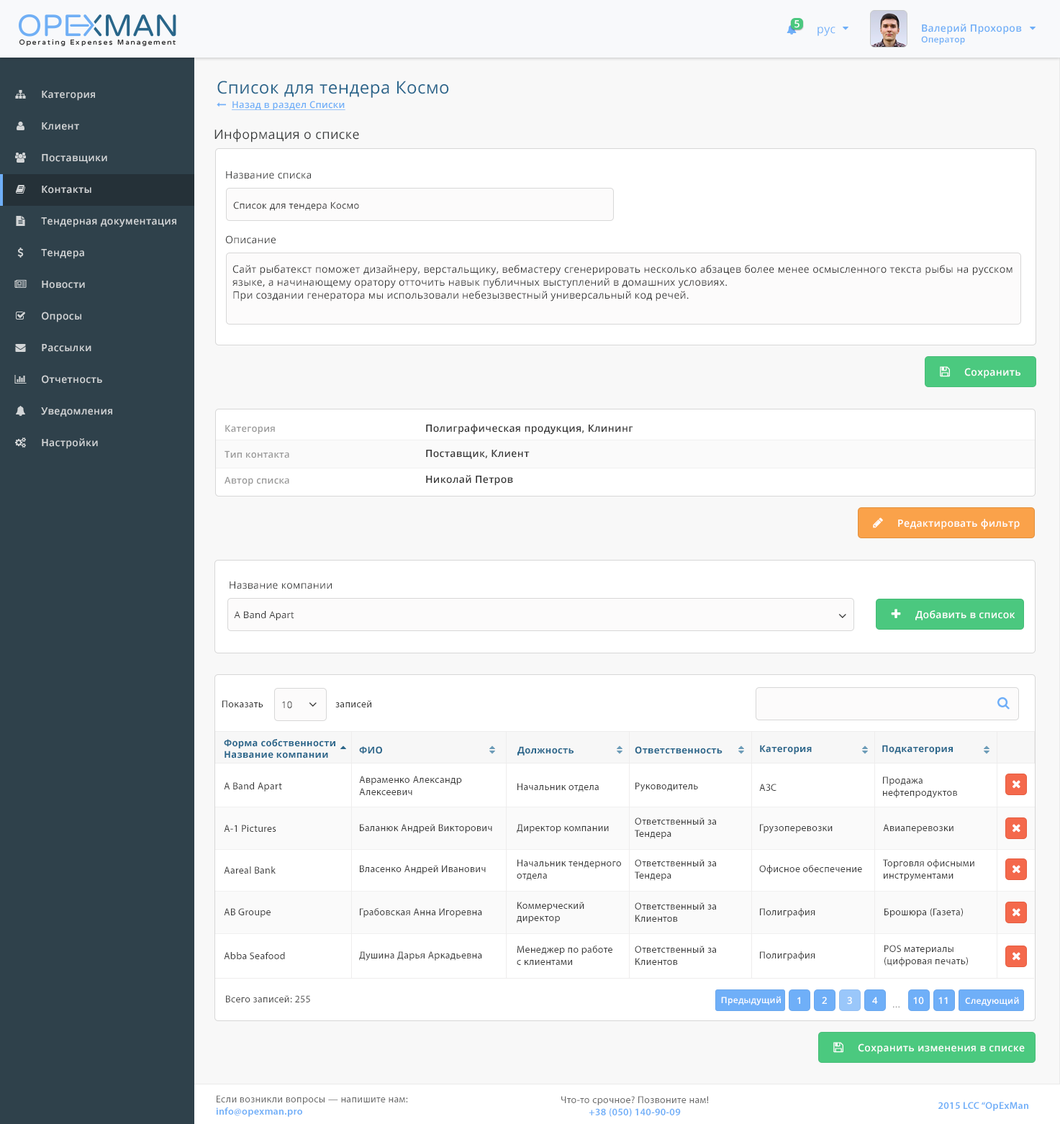
<style>
.page{position:relative;width:1060px;height:1124px;background:#ffffff}
.page>*{position:absolute;margin:0}
.t1{font:10px "OpenSans-Semibold";letter-spacing:0.025em;color:#ffffff}
.t2{font:11.5px "OpenSans";letter-spacing:0.025em;color:#6eaff8}
.t3{font:10px "OpenSans-Semibold";letter-spacing:0.025em;color:#6eaef7}
.t4{font:8.6px "OpenSans-Semibold";letter-spacing:0.025em;color:#6eaef7}
.t5{font:17.2px "OpenSans";letter-spacing:0.025em;color:#29658b}
.t6{font:10px "OpenSans-Semibold";letter-spacing:0.025em;color:#d2d5d7}
.t7{font:9.3px "OpenSans-Semibold";letter-spacing:0.025em;color:#6faff8;text-decoration:underline}
.t8{font:12.9px "OpenSans";letter-spacing:0.025em;color:#373838}
.t9{font:10px "OpenSans";letter-spacing:0.025em;color:#373838}
.t10{font:9.3px "OpenSans";letter-spacing:0.025em;color:#333333}
.t11{font:10px/12.9px "OpenSans";letter-spacing:0.025em;color:#333333}
.t12{font:9.4px "OpenSans-Semibold";letter-spacing:0.025em;color:#999999}
.t13{font:10.1px "OpenSans-Semibold";letter-spacing:0.025em;color:#333333}
.t14{font:9.3px "OpenSans-Semibold";letter-spacing:0.025em;color:#999999}
.t15{font:10px "MyriadPro-Regular";letter-spacing:0.025em;color:#333333}
.t16{font:9.3px "OpenSans-Bold";letter-spacing:0.025em;color:#29668b}
.t17{font:10px "MyriadPro-Regular";letter-spacing:0.025em;color:#3a3a3a}
.t18{font:10px "MyriadPro-Regular";letter-spacing:0.025em;color:#4c4c4c}
.t19{font:8.6px "OpenSans-Semibold";letter-spacing:0.025em;color:#ffffff}
.t20{font:9.3px "OpenSans-Semibold";letter-spacing:0.025em;color:#ffffff}
.t21{font:9.3px "OpenSans";letter-spacing:0.025em;color:#999999}
.t22{font:10px "MyriadPro-Regular";letter-spacing:0.025em;color:#696969}
.t23{font:10px "MyriadPro-Semibold";letter-spacing:0.025em;color:#6eaef8}
</style>
<div class="page">
<p class="t1" style="left:795px;top:20px;width:5px;height:8px">5</p>
<p class="t2" style="left:818px;top:27px;width:18px;height:9px">рус</p>
<p class="t3" style="left:921px;top:24px;width:101px;height:21px">Валерий Прохоров<br><span class="t4">Оператор</span></p>
<p class="t5" style="left:217px;top:81px;width:232px;height:17px">Список для тендера Космо</p>
<p class="t6" style="left:42px;top:91px;width:53px;height:10px">Категория</p>
<p class="t7" style="left:232px;top:101px;width:114px;height:9px">Назад в раздел Списки</p>
<p class="t6" style="left:42px;top:122px;width:37px;height:8px">Клиент</p>
<p class="t8" style="left:215px;top:129px;width:144px;height:14px">Информация о списке</p>
<p class="t6" style="left:42px;top:154px;width:65px;height:9px">Поставщики</p>
<p class="t9" style="left:226px;top:171px;width:85px;height:8px">Название списка</p>
<p class="t6" style="left:42px;top:186px;width:49px;height:8px">Контакты</p>
<p class="t10" style="left:233px;top:202px;width:126px;height:9px">Список для тендера Космо</p>
<p class="t6" style="left:41px;top:217px;width:135px;height:10px">Тендерная документация</p>
<p class="t9" style="left:225px;top:235px;width:51px;height:9px">Описание</p>
<p class="t6" style="left:41px;top:249px;width:43px;height:10px">Тендера</p>
<p class="t11" style="left:233px;top:265px;width:780px;height:37px;text-align:justify">Сайт рыбатекст поможет дизайнеру, верстальщику, вебмастеру сгенерировать несколько абзацев более менее осмысленного текста рыбы на русском языке, а начинающему оратору отточить навык публичных выступлений в домашних условиях.<br>При создании генератора мы использовали небезызвестный универсальный код речей.</p>
<p class="t6" style="left:42px;top:281px;width:43px;height:8px">Новости</p>
<p class="t6" style="left:42px;top:312px;width:39px;height:11px">Опросы</p>
<p class="t6" style="left:42px;top:344px;width:49px;height:8px">Рассылки</p>
<p class="t6" style="left:42px;top:375px;width:60px;height:9px">Отчетность</p>
<p class="t1" style="left:965px;top:368px;width:56px;height:11px">Сохранить</p>
<p class="t6" style="left:41px;top:407px;width:71px;height:10px">Уведомления</p>
<p class="t12" style="left:225px;top:425px;width:50px;height:9px">Категория</p>
<p class="t13" style="left:426px;top:424px;width:208px;height:11px">Полиграфическая продукция, Клининг</p>
<p class="t6" style="left:42px;top:438px;width:56px;height:11px">Настройки</p>
<p class="t13" style="left:426px;top:450px;width:104px;height:9px">Поставщик, Клиент</p>
<p class="t14" style="left:225px;top:451px;width:64px;height:8px">Тип контакта</p>
<p class="t14" style="left:225px;top:477px;width:64px;height:9px">Автор списка</p>
<p class="t13" style="left:426px;top:475px;width:87px;height:11px">Николай Петров</p>
<p class="t1" style="left:898px;top:519px;width:122px;height:11px">Редактировать фильтр</p>
<p class="t9" style="left:230px;top:582px;width:102px;height:8px">Название компании</p>
<p class="t10" style="left:234px;top:611px;width:60px;height:10px">A Band Apart</p>
<p class="t1" style="left:916px;top:610px;width:100px;height:11px">Добавить в список</p>
<p class="t15" style="left:222px;top:700px;width:41px;height:8px">Показать</p>
<p class="t10" style="left:282px;top:701px;width:10px;height:8px">10</p>
<p class="t15" style="left:335px;top:700px;width:36px;height:8px">записей</p>
<p class="t16" style="left:224px;top:739px;width:111px;height:20px">Форма собственности<br>Название компании</p>
<p class="t16" style="left:359px;top:747px;width:23px;height:7px">ФИО</p>
<p class="t16" style="left:518px;top:747px;width:56px;height:9px">Должность</p>
<p class="t16" style="left:635px;top:747px;width:88px;height:7px">Ответственность</p>
<p class="t16" style="left:760px;top:745px;width:52px;height:9px">Категория</p>
<p class="t16" style="left:883px;top:745px;width:70px;height:9px">Подкатегория</p>
<p class="t17" style="left:224px;top:783px;width:58px;height:9px">A Band Apart</p>
<p class="t17" style="left:359px;top:776px;width:103px;height:19px">Авраменко Александр <br>Алексеевич</p>
<p class="t17" style="left:518px;top:783px;width:81px;height:10px">Начальник отдела</p>
<p class="t17" style="left:636px;top:783px;width:62px;height:9px">Руководитель</p>
<p class="t17" style="left:759px;top:784px;width:18px;height:7px">АЗС</p>
<p class="t17" style="left:883px;top:777px;width:74px;height:21px">Продажа <br>нефтепродуктов</p>
<p class="t17" style="left:635px;top:818px;width:81px;height:21px">Ответственный за <br>Тендера</p>
<p class="t17" style="left:224px;top:825px;width:52px;height:7px">A-1 Pictures</p>
<p class="t17" style="left:360px;top:824px;width:132px;height:10px">Баланюк Андрей Викторович</p>
<p class="t17" style="left:517px;top:824px;width:92px;height:10px">Директор компании</p>
<p class="t17" style="left:760px;top:824px;width:73px;height:10px">Грузоперевозки</p>
<p class="t17" style="left:883px;top:824px;width:71px;height:10px">Авиаперевозки</p>
<p class="t17" style="left:224px;top:867px;width:52px;height:7px">Aareal Bank</p>
<p class="t17" style="left:360px;top:865px;width:126px;height:10px">Власенко Андрей Иванович</p>
<p class="t17" style="left:517px;top:860px;width:104px;height:21px">Начальник тендерного <br>отдела</p>
<p class="t17" style="left:635px;top:860px;width:81px;height:21px">Ответственный за <br>Тендера</p>
<p class="t17" style="left:759px;top:865px;width:103px;height:10px">Офисное обеспечение</p>
<p class="t17" style="left:883px;top:860px;width:92px;height:21px">Торговля офисными<br>инструментами</p>
<p class="t17" style="left:517px;top:902px;width:68px;height:22px">Коммерческий <br>директор</p>
<p class="t17" style="left:635px;top:903px;width:81px;height:19px">Ответственный за <br>Клиентов</p>
<p class="t17" style="left:224px;top:909px;width:47px;height:9px">AB Groupe</p>
<p class="t17" style="left:360px;top:909px;width:122px;height:9px">Грабовская Анна Игоревна</p>
<p class="t17" style="left:760px;top:909px;width:56px;height:9px">Полиграфия</p>
<p class="t17" style="left:885px;top:909px;width:78px;height:9px">Брошюра (Газета)</p>
<p class="t17" style="left:224px;top:952px;width:61px;height:8px">Abba Seafood</p>
<p class="t17" style="left:359px;top:952px;width:123px;height:9px">Душина Дарья Аркадьевна</p>
<p class="t17" style="left:517px;top:946px;width:96px;height:19px">Менеджер по работе <br>с клиентами</p>
<p class="t17" style="left:635px;top:946px;width:81px;height:19px">Ответственный за <br>Клиентов</p>
<p class="t17" style="left:760px;top:952px;width:56px;height:9px">Полиграфия</p>
<p class="t17" style="left:885px;top:945px;width:83px;height:22px">POS материалы<br>(цифровая печать)</p>
<p class="t18" style="left:226px;top:996px;width:84px;height:7px">Всего записей: 255</p>
<p class="t19" style="left:721px;top:996px;width:60px;height:10px">Предыдущий</p>
<p class="t20" style="left:798px;top:997px;width:3px;height:7px">1</p>
<p class="t20" style="left:822px;top:997px;width:5px;height:7px">2</p>
<p class="t20" style="left:847px;top:997px;width:5px;height:8px">3</p>
<p class="t20" style="left:873px;top:997px;width:5px;height:7px">4</p>
<p class="t20" style="left:914px;top:997px;width:10px;height:8px">10</p>
<p class="t20" style="left:939px;top:997px;width:9px;height:7px">11</p>
<p class="t19" style="left:965px;top:997px;width:54px;height:9px">Следующий</p>
<p class="t21" style="left:893px;top:1006px;width:7px;height:3px">...</p>
<p class="t1" style="left:858px;top:1044px;width:167px;height:11px">Сохранить изменения в списке</p>
<p class="t22" style="left:216px;top:1096px;width:192px;height:21px">Если возникли вопросы — напишите нам:<br><span class="t23">info@opexman.pro</span></p>
<p class="t22" style="left:562px;top:1096px;width:147px;height:21px;text-align:center">Что-то срочное? Позвоните нам!<br><span class="t23">+38 (050) 140-90-09</span></p>
<p class="t23" style="left:939px;top:1102px;width:90px;height:10px">2015 LCC “OpExMan</p>
</div>
